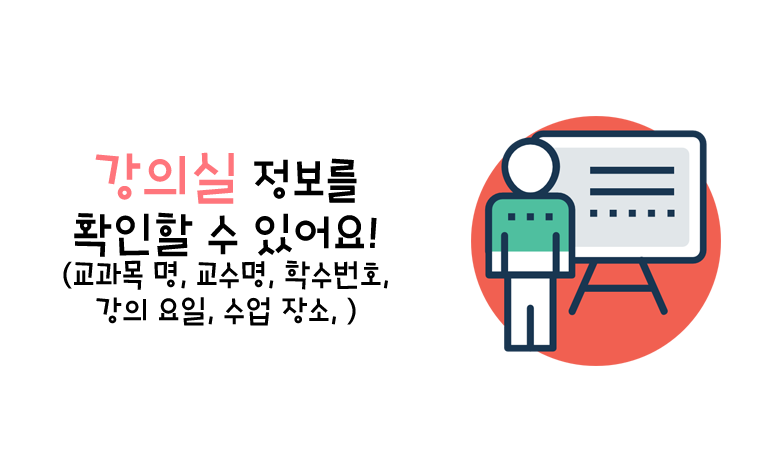
<style>
.page{position:relative;width:765px;height:454px;background:#ffffff}
.page>*{position:absolute;margin:0}
.t1{font:30px "HoonJungleR";color:#000000}
.t2{font:54px "HoonJungleR";color:#ff757c}
.t3{font:45px "HoonJungleR";color:#000000}
</style>
<div class="page">
<p class="t1" style="left:63px;top:152px;width:325px;height:174px;text-align:center"><span class="t2"><br>강의실</span><span class="t3"> 정보를 <br>확인할 수 있어요!<br></span>(교과목 명, 교수명, 학수번호, <br>강의 요일, 수업 장소, )</p>
</div>
